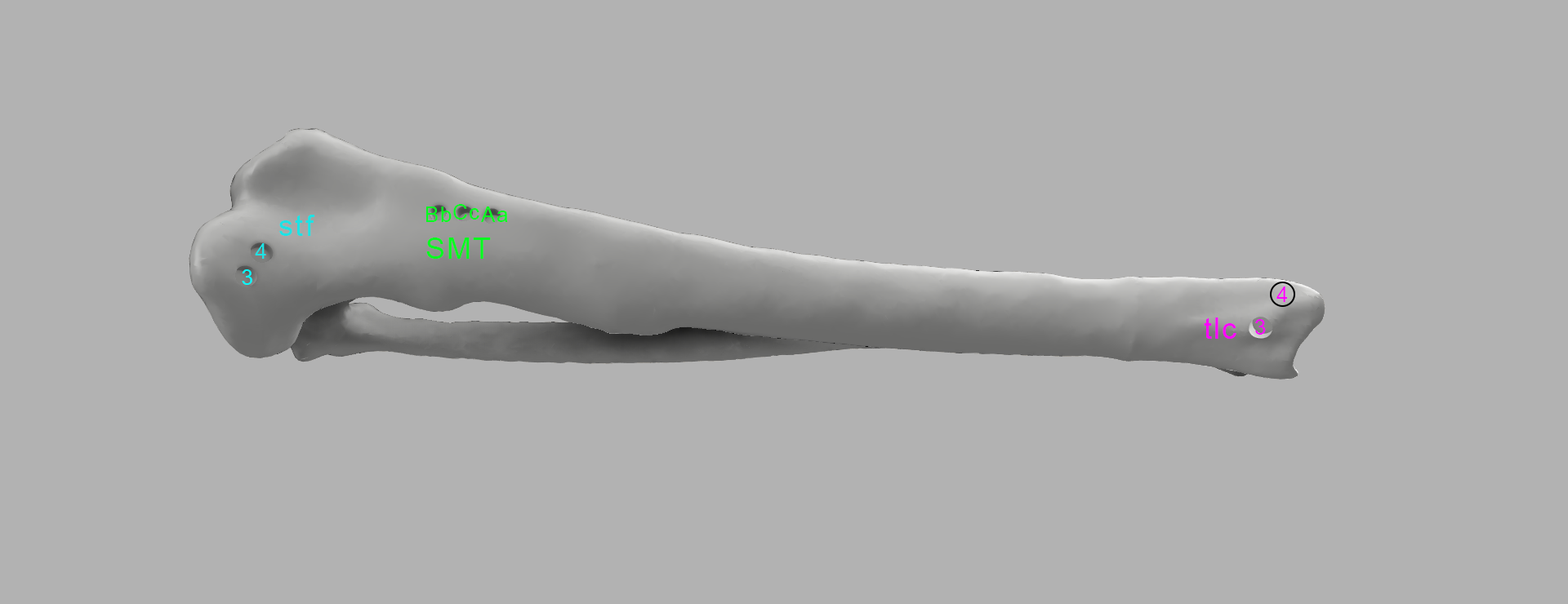
<style>
.page{position:relative;width:1568px;height:604px;background:#b2b2b2}
.page>*{position:absolute;margin:0}
.t1{font:21.2px "ArialMT";letter-spacing:0.06em;color:#00ff1e}
.t2{font:29.4px "ArialMT";letter-spacing:0.06em;color:#1ce3e5}
.t3{font:21.2px "ArialMT";letter-spacing:0.06em;color:#1ce3e5}
.t4{font:29.4px "ArialMT";letter-spacing:0.06em;color:#00ff1e}
.t5{font:21.2px "ArialMT";letter-spacing:0.06em;color:#00fcff}
.t6{font:21.2px "ArialMT";letter-spacing:0.06em;color:#ff00ff}
.t7{font:29.4px "ArialMT";letter-spacing:0.06em;color:#ff00ff}
</style>
<div class="page">
<p class="t1" style="left:426px;top:207px;width:26px;height:15px">Bb</p>
<p class="t1" style="left:453px;top:204px;width:26px;height:16px">Cc</p>
<p class="t1" style="left:481px;top:207px;width:27px;height:15px">Aa</p>
<p class="t2" style="left:279px;top:215px;width:36px;height:21px">stf</p>
<p class="t3" style="left:255px;top:243px;width:11px;height:16px">4</p>
<p class="t4" style="left:426px;top:238px;width:65px;height:21px">SMT</p>
<p class="t5" style="left:242px;top:270px;width:10px;height:15px">3</p>
<p class="t6" style="left:1276px;top:287px;width:11px;height:15px">4</p>
<p class="t7" style="left:1204px;top:318px;width:32px;height:21px">tlc</p>
<p class="t6" style="left:1255px;top:319px;width:11px;height:16px">3</p>
</div>
